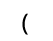
<style>
.page{position:relative;width:53px;height:41px;background:#ffffff}
.page>*{position:absolute;margin:0}
.t1{font:23.7px "DroidSans";color:#000000}
</style>
<div class="page">
<p class="t1" style="left:22px;top:13px;width:6px;height:22px">(</p>
</div>
